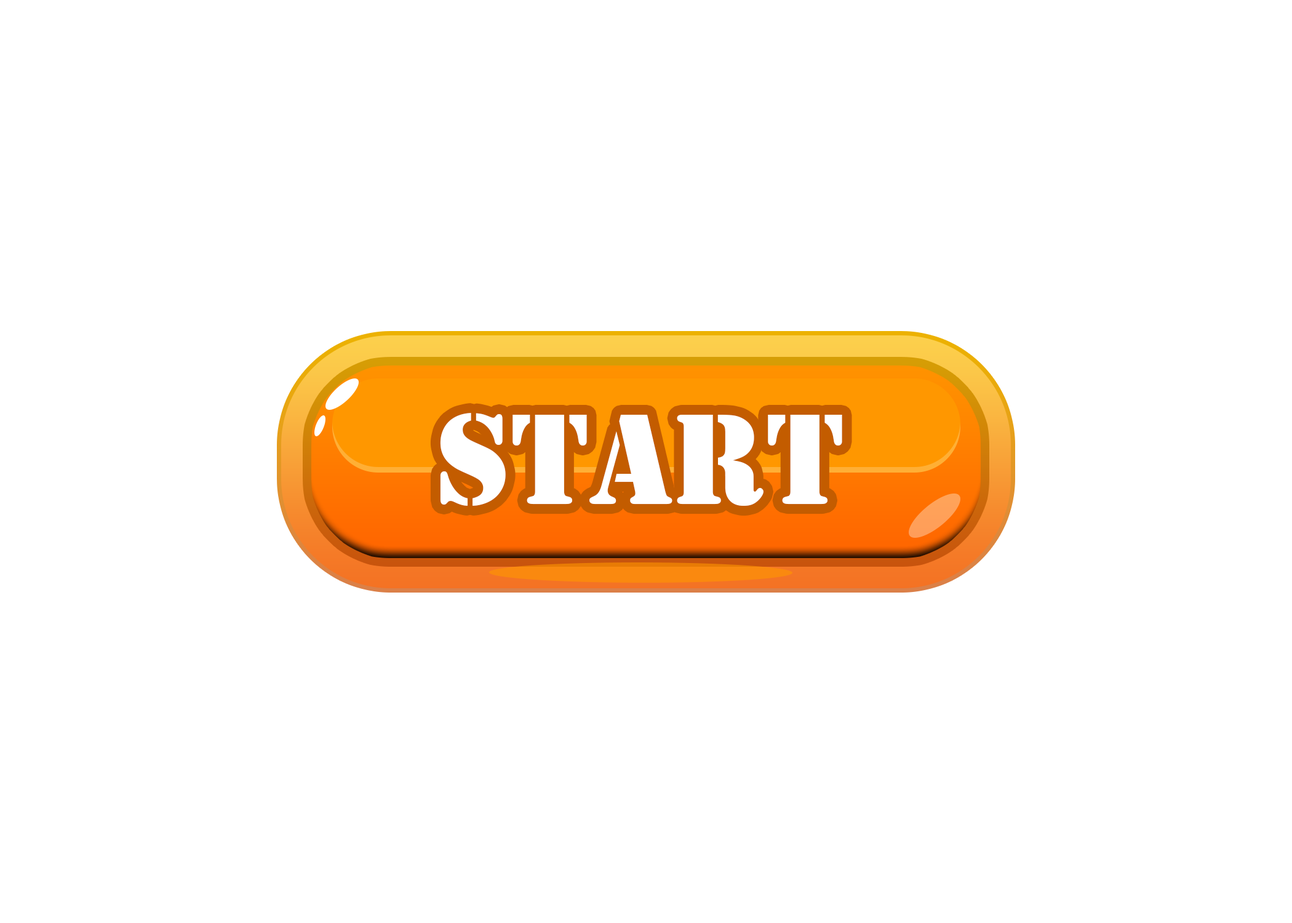
<style>
.page{position:relative;width:1292px;height:923px;background:#ffffff}
.page>*{position:absolute;margin:0}
.t1{font:133.3px "Stencil";color:#ffffff}
</style>
<div class="page">
<p class="t1" style="left:440px;top:413px;width:402px;height:93px">Start</p>
</div>
